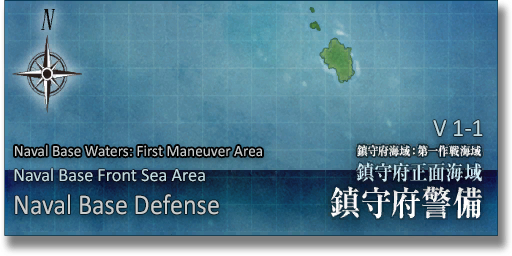
<style>
.page{position:relative;width:512px;height:256px}
.page>*{position:absolute;margin:0}
.t1{font:24.8px "Calibri";color:#c1d9e0;scale:0.97 1}
.t2{font:15.8px "Calibri";color:#c8cccd;scale:0.97 1}
.t3{font:18.8px "Calibri";color:#c1d9e0;scale:0.97 1}
.t4{font:28.7px "Calibri";color:#c8cccd;scale:0.91 1}
</style>
<div class="page">
<p class="t1" style="left:433px;top:120px;width:50px;height:16px">V 1-1</p>
<p class="t2" style="left:15px;top:145px;width:247px;height:12px">Naval Base Waters: First Maneuver Area</p>
<p class="t3" style="left:14px;top:168px;width:191px;height:14px">Naval Base Front Sea Area</p>
<p class="t4" style="left:15px;top:194px;width:204px;height:21px">Naval Base Defense</p>
</div>
